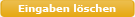
<style>
.page{position:relative;width:135px;height:17px}
.page>*{position:absolute;margin:0}
.t1{font:10px "Verdana-Bold";color:#ffffff}
</style>
<div class="page">
<p class="t1" style="left:18px;top:4px;width:98px;height:10px">Eingaben löschen</p>
</div>
